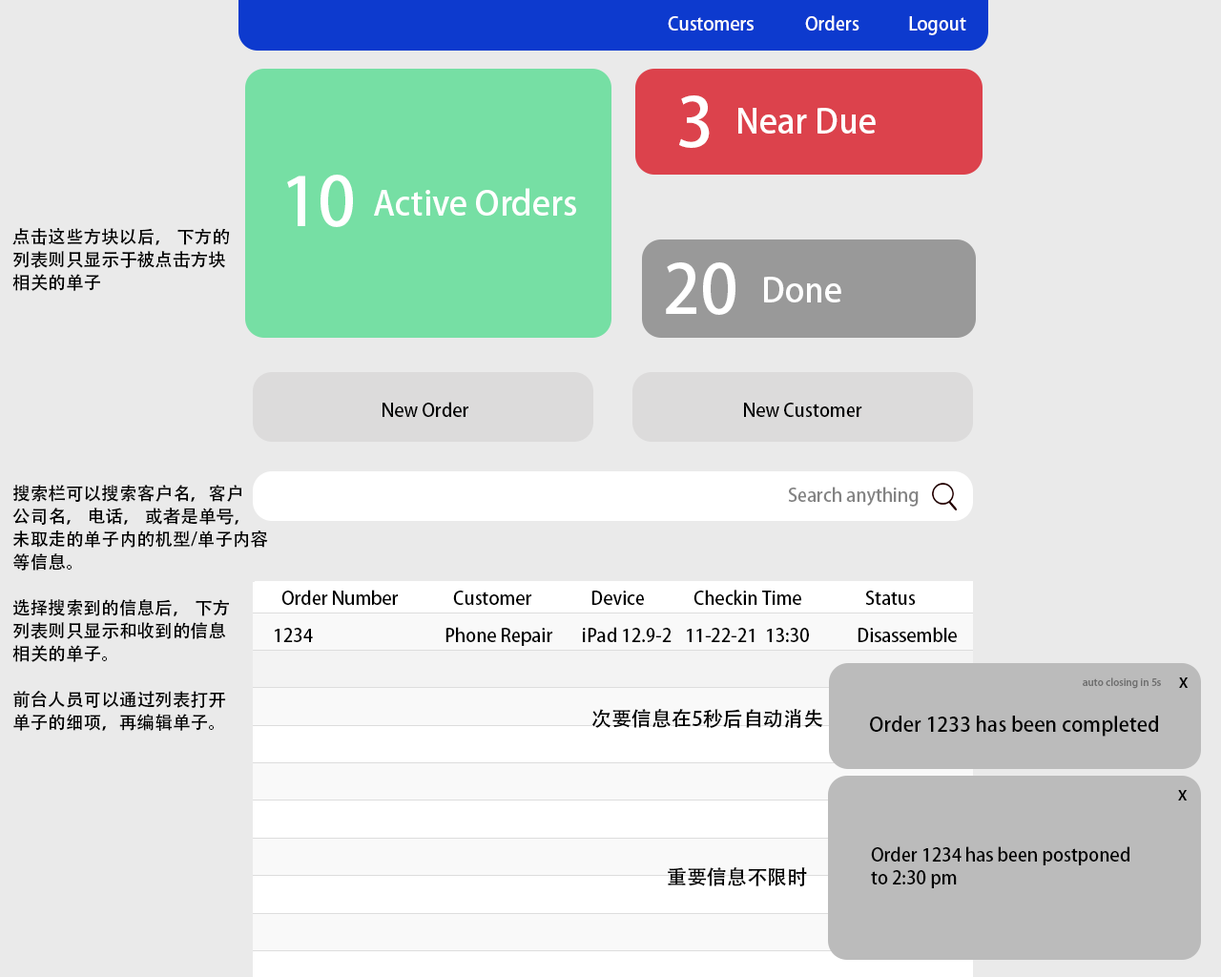
<style>
.page{position:relative;width:1221px;height:977px;background:#eaeaea}
.page>*{position:absolute;margin:0}
.t1{font:30.5px "AdobeHeitiStd-Regular";color:#ffffff}
.t2{font:30.5px/22.9px "AdobeHeitiStd-Regular";color:#000000}
.t3{font:30.5px "AdobeHeitiStd-Regular";color:#000000}
.t4{font:30.5px "AdobeHeitiStd-Regular";color:#838383}
.t5{font:17.2px "AdobeHeitiStd-Regular";color:#6f6f6f}
.t6{font:34.3px "AdobeHeitiStd-Regular";color:#000000}
</style>
<div class="page">
<p class="t1" style="left:668px;top:15px;width:298px;height:20px">Customers  Orders  Logout</p>
<p class="t2" style="left:12px;top:227px;width:218px;height:64px">点击这些方块以后， 下方的<br>列表则只显示于被点击方块<br>相关的单子</p>
<p class="t3" style="left:382px;top:402px;width:86px;height:15px">New Order</p>
<p class="t3" style="left:744px;top:403px;width:118px;height:14px">New Customer</p>
<p class="t2" style="left:12px;top:485px;width:256px;height:246px">搜索栏可以搜索客户名，客户<br>公司名， 电话， 或者是单号，<br>未取走的单子内的机型/单子内容<br>等信息。<br><br>选择搜索到的信息后， 下方<br>列表则只显示和收到的信息<br>相关的单子。<br><br>前台人员可以通过列表打开<br>单子的细项，再编辑单子。</p>
<p class="t4" style="left:788px;top:486px;width:131px;height:20px">Search anything</p>
<p class="t3" style="left:281px;top:589px;width:635px;height:16px">Order Number  Customer  Device  Checkin Time  Status</p>
<p class="t3" style="left:275px;top:627px;width:682px;height:19px">1234    Phone Repair iPad 12.9-2 11-22-21  13:30  Disassemble</p>
<p class="t5" style="left:1083px;top:677px;width:78px;height:12px">auto closing in 5s</p>
<p class="t3" style="left:1179px;top:677px;width:9px;height:11px">x</p>
<p class="t6" style="left:592px;top:709px;width:231px;height:19px">次要信息在5秒后自动消失</p>
<p class="t6" style="left:870px;top:715px;width:288px;height:21px">Order 1233 has been completed</p>
<p class="t3" style="left:1178px;top:790px;width:9px;height:10px">x</p>
<p class="t2" style="left:871px;top:846px;width:258px;height:42px">Order 1234 has been postponed <br>to 2:30 pm</p>
<p class="t6" style="left:668px;top:867px;width:139px;height:19px">重要信息不限时</p>
</div>
